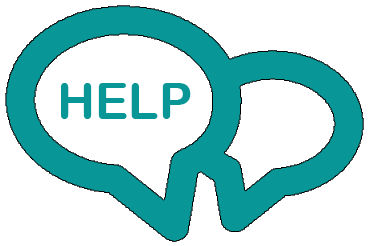
<style>
.page{position:relative;width:368px;height:246px;background:#ffffff}
.page>*{position:absolute;margin:0}
.t1{font:50px "ArialRoundedMTBold";color:#099696}
</style>
<div class="page">
<p class="t1" style="left:61px;top:83px;width:130px;height:36px">HELP</p>
</div>
